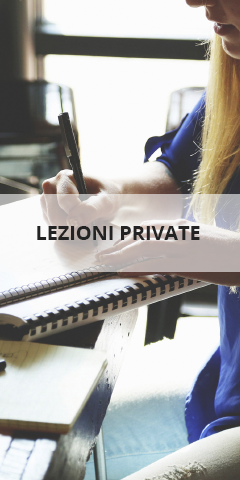
<style>
.page{position:relative;width:240px;height:480px}
.page>*{position:absolute;margin:0}
.t1{font:20px "OpenSans-Bold";letter-spacing:-0.005em;color:#242323;text-transform:uppercase}
</style>
<div class="page">
<p class="t1" style="left:37px;top:226px;width:163px;height:14px">Lezioni Private</p>
</div>
